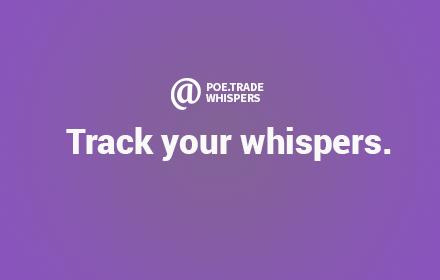
<style>
.page{position:relative;width:440px;height:280px}
.page>*{position:absolute;margin:0}
.t1{font:12.1px/11.5px "SourceSansPro-Bold";letter-spacing:-0.02em;color:#faf9fa}
.t2{font:35px "Roboto-Black";color:#faf9fa}
</style>
<div class="page">
<p class="t1" style="left:206px;top:83px;width:58px;height:19px">POE.TRADE<br>WHISPERS</p>
<p class="t2" style="left:66px;top:127px;width:325px;height:34px">Track your whispers.</p>
</div>
